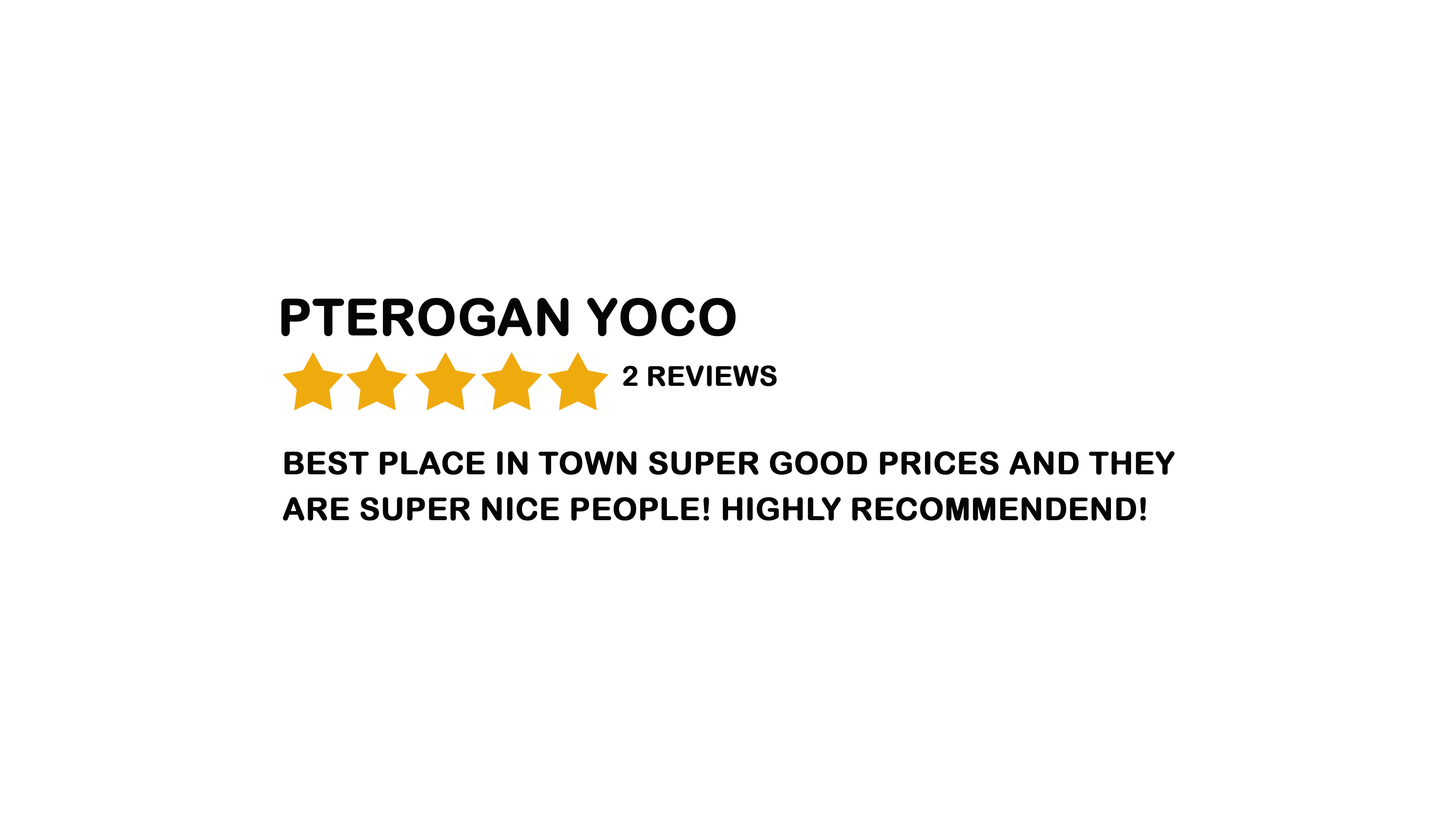
<style>
.page{position:relative;width:1456px;height:819px;background:#ffffff}
.page>*{position:absolute;margin:0}
.t1{font:49.9px "ArialRoundedMTBold";color:#050505;text-transform:uppercase;font-weight:bold}
.t2{font:27.2px "ArialRoundedMTBold";color:#050505;text-transform:uppercase;font-weight:bold}
.t3{font:31.1px/45.8px "ArialRoundedMTBold";color:#050505;text-transform:uppercase;font-weight:bold}
</style>
<div class="page">
<p class="t1" style="left:281px;top:298px;width:455px;height:38px">Pterogan Yoco</p>
<p class="t2" style="left:623px;top:365px;width:154px;height:21px">2 reviews</p>
<p class="t3" style="left:283px;top:451px;width:892px;height:70px">BEST place in town super good prices and they <br>are super nice people! highly recommendend!</p>
</div>
